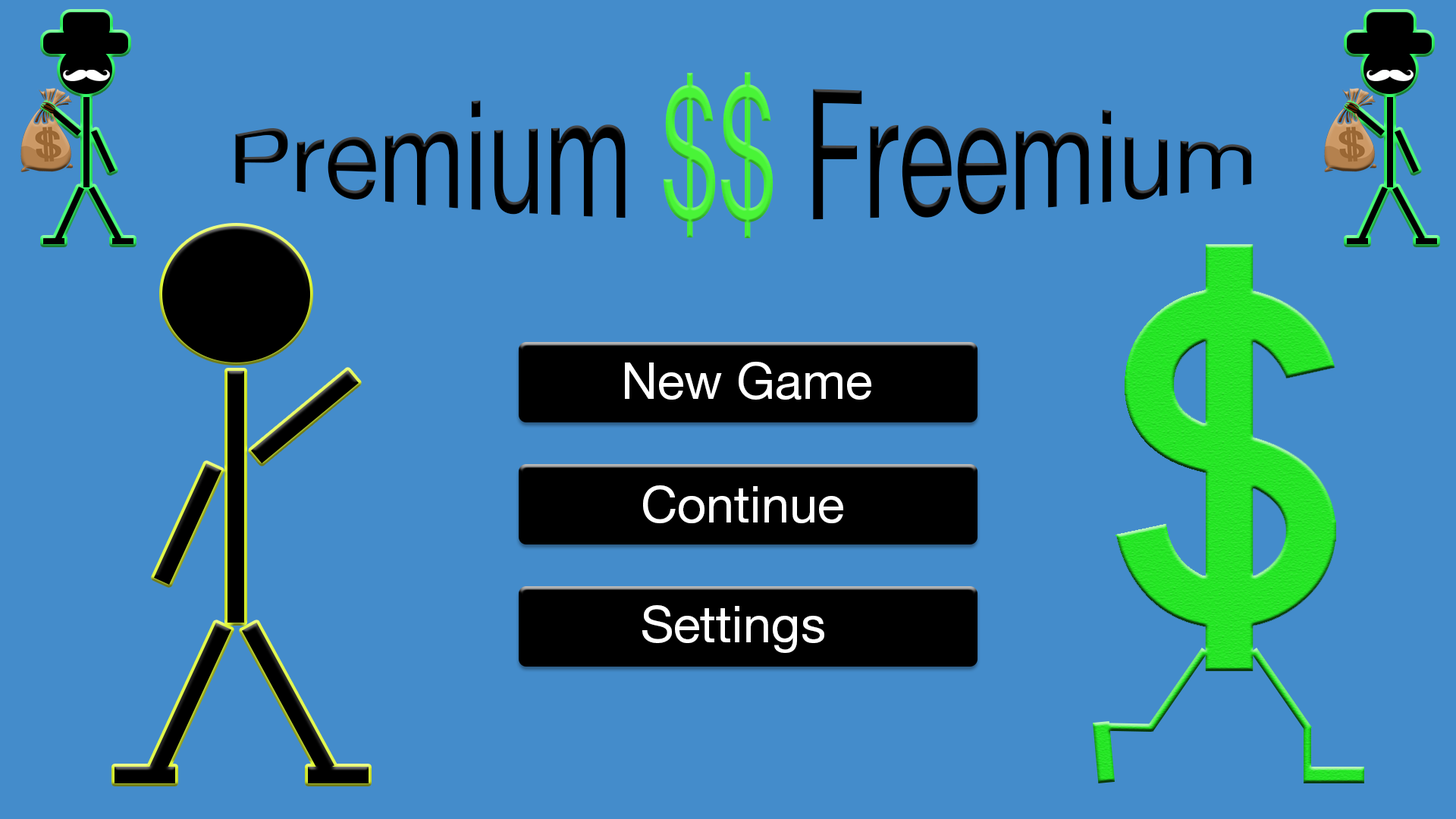
<style>
.page{position:relative;width:1456px;height:819px;background:#448ccb}
.page>*{position:absolute;margin:0}
.t1{font:64.1px "HelveticaNeueLTPro-Roman";color:#000000;scale:1.58 1}
.t2{font:64.1px "HelveticaNeueLTPro-Roman";color:#49f437;scale:1.58 1}
.t3{font:50.6px "HelveticaNeueLTPro-Roman";color:#ffffff}
</style>
<div class="page">
<p class="t1" style="left:235px;top:72px;width:1017px;height:166px">Premium <span class="t2">$$ </span>Freemium</p>
<p class="t3" style="left:625px;top:362px;width:246px;height:38px">New Game</p>
<p class="t3" style="left:643px;top:485px;width:200px;height:38px">Continue</p>
<p class="t3" style="left:642px;top:605px;width:182px;height:48px">Settings</p>
</div>
